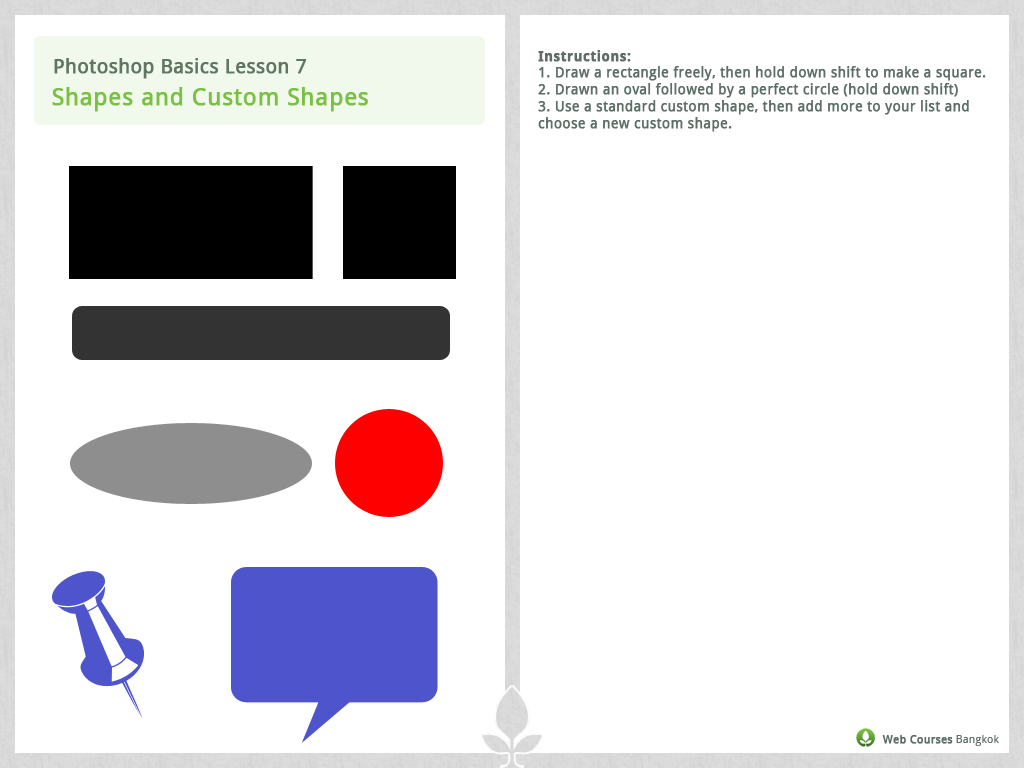
<style>
.page{position:relative;width:1024px;height:768px;background:#ffffff}
.page>*{position:absolute;margin:0}
.t1{font:14px "DroidSans";letter-spacing:0.01em;color:#5d6e66;font-weight:bold}
.t2{font:14px "DroidSans-Bold";letter-spacing:0.01em;color:#5d6e66;font-weight:bold}
.t3{font:19.6px "DroidSans";letter-spacing:0.01em;color:#5d6e66;font-weight:bold}
.t4{font:24px "DroidSans";letter-spacing:0.01em;color:#7ac043;font-weight:bold}
.t5{font:11.1px "DroidSans";letter-spacing:0.01em;color:#5d6e66;font-weight:bold}
.t6{font:11.1px "DroidSans";letter-spacing:0.01em;color:#5d6e66}
</style>
<div class="page">
<p class="t1" style="left:538px;top:50px;width:448px;height:82px"><span class="t2">Instructions:<br></span>1. Draw a rectangle freely, then hold down shift to make a square.<br>2. Drawn an oval followed by a perfect circle (hold down shift)<br>3. Use a standard custom shape, then add more to your list and choose a new custom shape.</p>
<p class="t3" style="left:54px;top:58px;width:252px;height:21px">Photoshop Basics Lesson 7</p>
<p class="t4" style="left:52px;top:87px;width:316px;height:25px">Shapes and Custom Shapes</p>
<p class="t5" style="left:882px;top:735px;width:117px;height:11px">Web Courses<span class="t6"> Bangkok</span></p>
</div>
